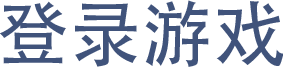
<style>
.page{position:relative;width:283px;height:67px;background:#ffffff}
.page>*{position:absolute;margin:0}
.t1{font:72px "AdobeHeitiStd-Regular";color:#40537b}
</style>
<div class="page">
<p class="t1" style="left:0px;top:0px;width:284px;height:67px">登录游戏</p>
</div>
